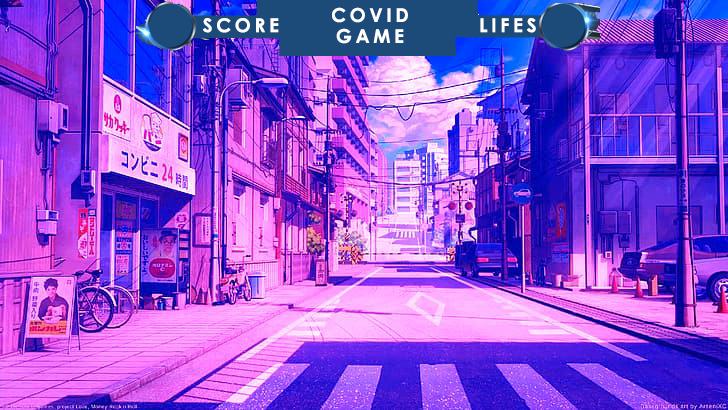
<style>
.page{position:relative;width:728px;height:410px}
.page>*{position:absolute;margin:0}
.t1{font:19px "CenturyGothic-Bold";letter-spacing:0.195em;color:#ffffff}
</style>
<div class="page">
<p class="t1" style="left:332px;top:7px;width:76px;height:16px">COVID</p>
<p class="t1" style="left:203px;top:18px;width:76px;height:15px">SCORE</p>
<p class="t1" style="left:336px;top:28px;width:68px;height:16px">GAME</p>
<p class="t1" style="left:480px;top:18px;width:56px;height:15px">LIFES</p>
</div>
